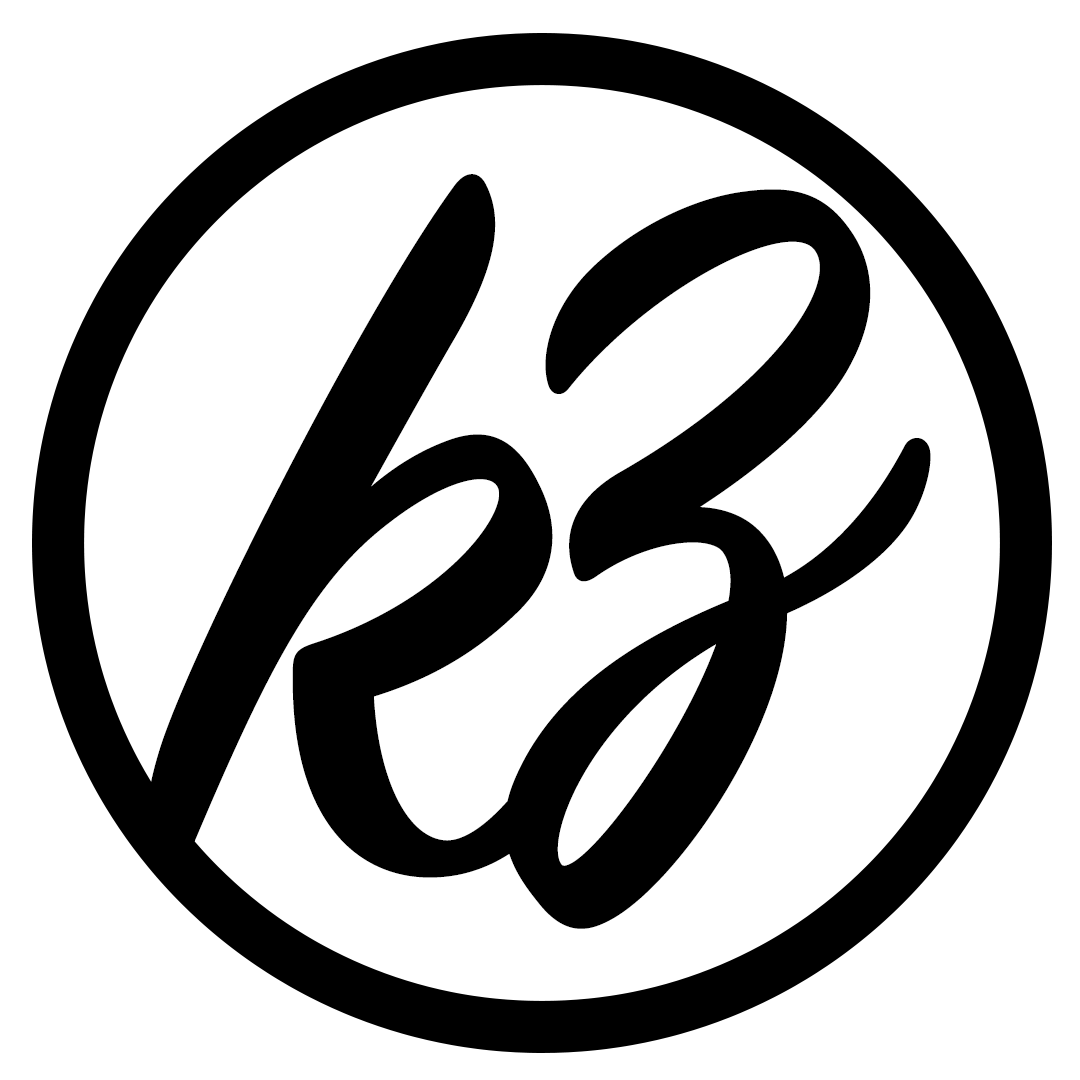
<style>
.page{position:relative;width:1080px;height:1080px;background:#ffffff}
.page>*{position:absolute;margin:0}
.t1{font:1041.7px "SignPainter-HouseScript";letter-spacing:-0.06em;color:#000000;font-weight:bold}
</style>
<div class="page">
<p class="t1" style="left:146px;top:174px;width:785px;height:755px">kz</p>
</div>
